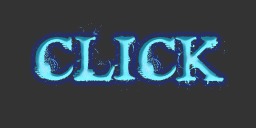
<style>
.page{position:relative;width:256px;height:128px;background:#333333}
.page>*{position:absolute;margin:0}
.t1{font:64px "TimesNewYorker"}
</style>
<div class="page">
<p class="t1" style="left:32px;top:23px;width:196px;height:68px">CLICK</p>
</div>
